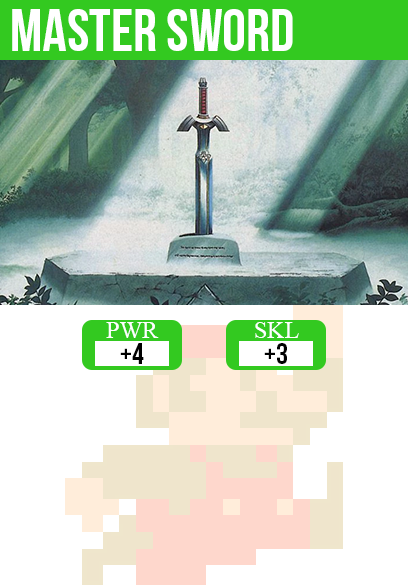
<style>
.page{position:relative;width:408px;height:585px;background:#ffffff}
.page>*{position:absolute;margin:0}
.t1{font:60px "BebasNeue";color:#ffffff}
.t2{font:24px "TimesNewRomanPSMT";color:#ffffff}
.t3{font:30px "BebasNeue";color:#000000}
</style>
<div class="page">
<p class="t1" style="left:12px;top:9px;width:281px;height:42px">master sword</p>
<p class="t2" style="left:106px;top:322px;width:53px;height:16px">PWR</p>
<p class="t2" style="left:255px;top:322px;width:44px;height:16px">SKL</p>
<p class="t3" style="left:120px;top:343px;width:24px;height:21px">+4</p>
<p class="t3" style="left:264px;top:343px;width:23px;height:21px">+3</p>
</div>
